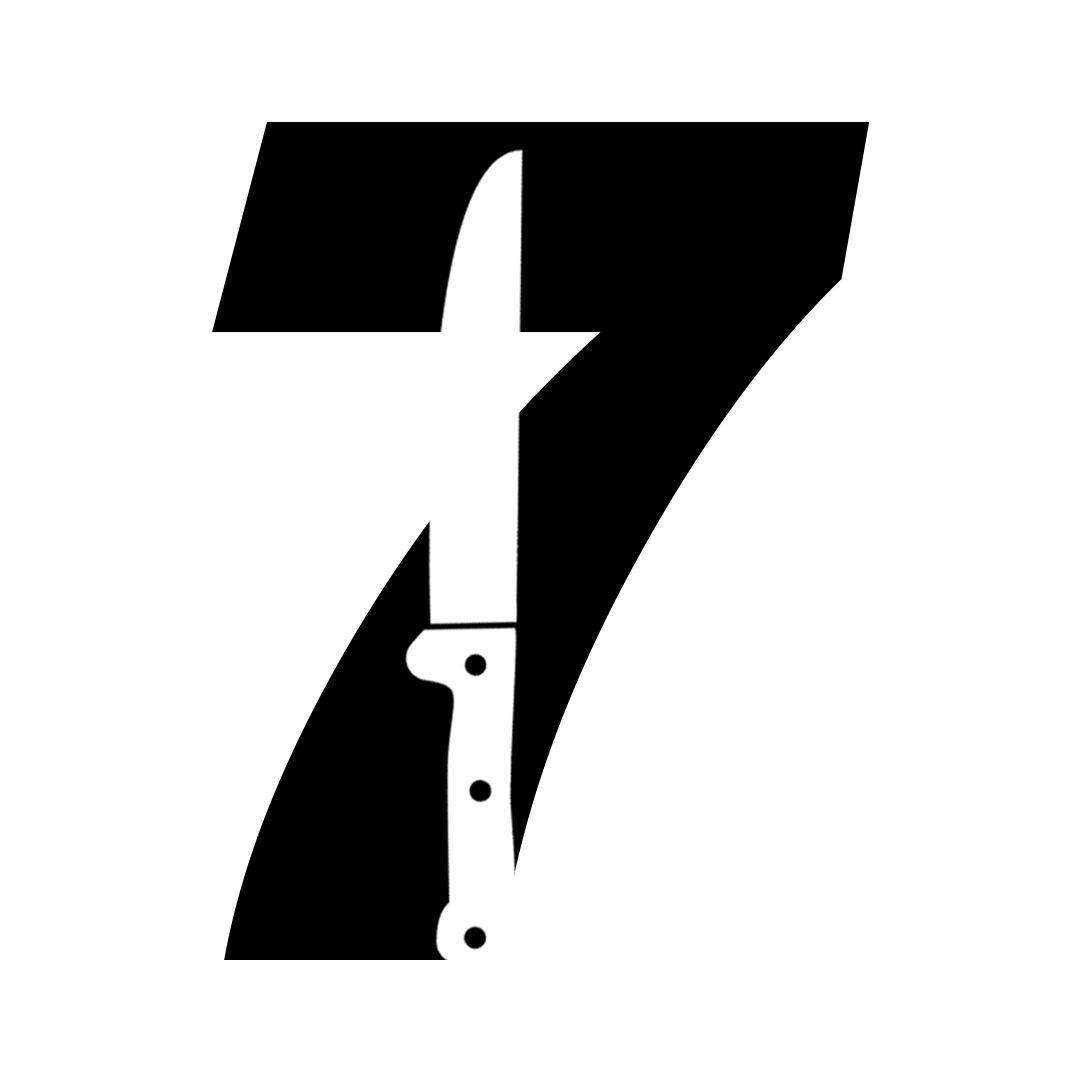
<style>
.page{position:relative;width:1080px;height:1080px;background:#ffffff}
.page>*{position:absolute;margin:0}
.t1{font:1257.5px "FranklinGothic-Heavy";color:#000000;font-style:italic}
</style>
<div class="page">
<p class="t1" style="left:212px;top:122px;width:658px;height:838px">7</p>
</div>
